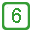
<style>
.page{position:relative;width:32px;height:32px;background:#ffffff}
.page>*{position:absolute;margin:0}
.t1{font:20px "ArialMT";color:#349c34}
</style>
<div class="page">
<p class="t1" style="left:12px;top:8px;width:9px;height:15px">6</p>
</div>
